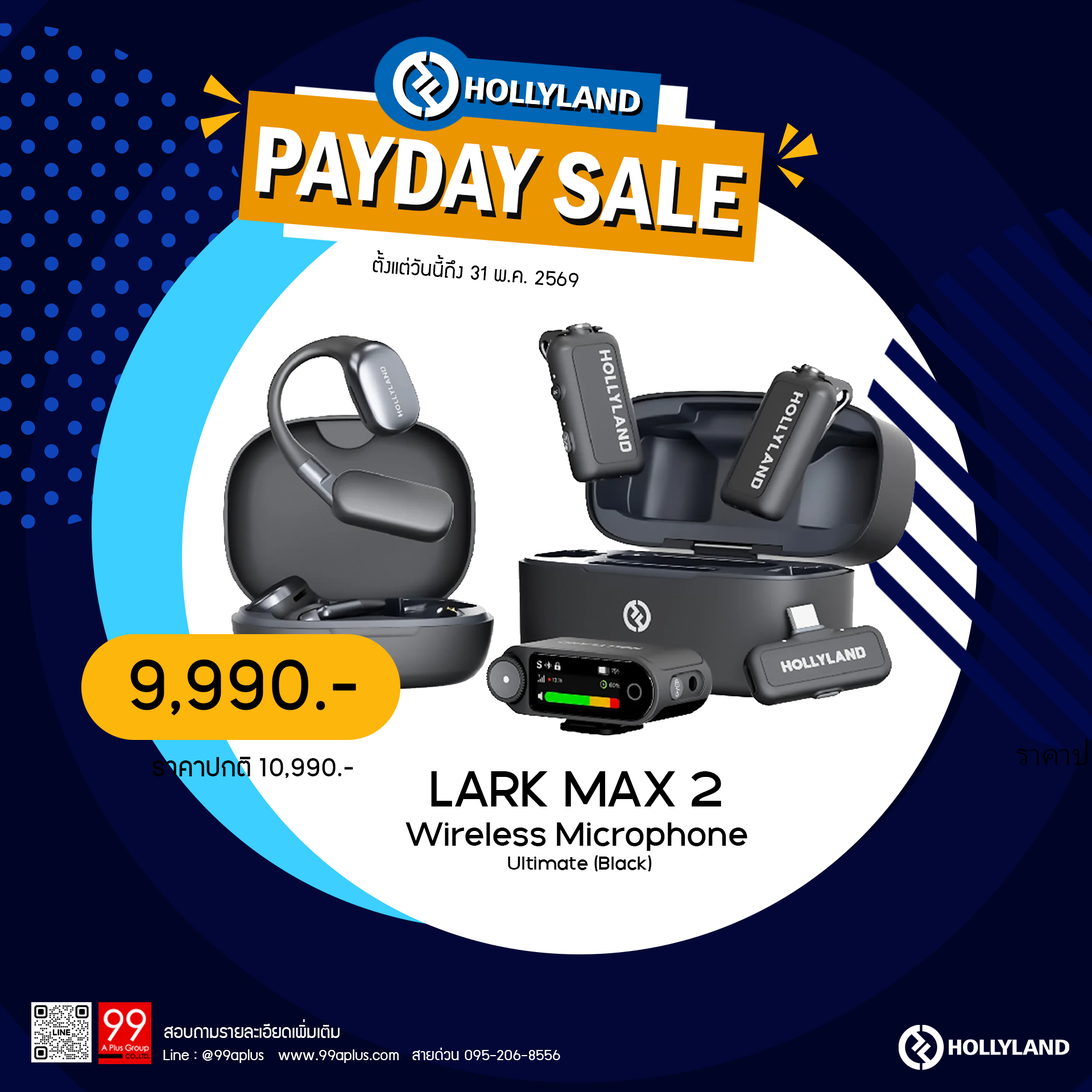
<style>
.page{position:relative;width:1092px;height:1092px;background:#020737}
.page>*{position:absolute;margin:0}
.t1{font:97.5px "FranklinGothic-DemiCond";color:#ffffff}
.t2{font:97.5px "FranklinGothic-DemiCond"}
.t3{font:23.2px "supermarket";color:#000000}
.t4{font:83.5px "PK-NakhonPathom-Demo";color:#000000}
.t5{font:30.3px "PK-NakhonPathom-Demo";color:#000000}
.t6{font:54px "GalakPro-Demo";color:#000000}
.t7{font:35.6px "GalakPro-Demo";color:#000000}
.t8{font:20.4px "GalakPro-Demo";color:#000000}
.t9{font:19.8px "supermarket";color:#ffffff}
.t10{font:17.2px "supermarket";color:#ffffff}
</style>
<div class="page">
<p class="t1" style="left:255px;top:126px;width:488px;height:105px;rotate:5deg">PAYDAY SALE</p>
<p class="t2" style="left:259px;top:133px;width:488px;height:105px;rotate:5deg">PAYDAY SALE</p>
<p class="t3" style="left:373px;top:250px;width:205px;height:37px;rotate:4deg">ตั้งแต่วันนี้ถึง 31 พ.ค. 2569</p>
<p class="t4" style="left:130px;top:659px;width:226px;height:56px">9,990.-</p>
<p class="t5" style="left:152px;top:756px;width:201px;height:22px">ราคาปกติ 10,990.-</p>
<p class="t6" style="left:431px;top:771px;width:290px;height:35px">LARK MAX 2</p>
<p class="t7" style="left:406px;top:822px;width:341px;height:29px">Wireless Microphone</p>
<p class="t8" style="left:508px;top:855px;width:144px;height:16px">Ultimate (Black)</p>
<p class="t9" style="left:164px;top:1019px;width:176px;height:19px">สอบถามรายละเอียดเพิ่มเติม</p>
<p class="t10" style="left:163px;top:1049px;width:236px;height:14px">Line : @99aplus   www.99aplus.com</p>
<p class="t10" style="left:412px;top:1048px;width:148px;height:12px">สายด่วน 095-206-8556</p>
</div>
